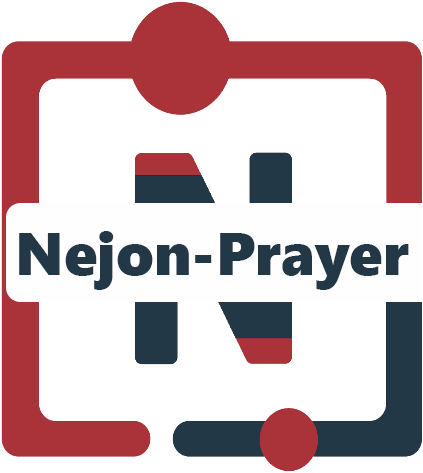
<style>
.page{position:relative;width:423px;height:473px;background:#ffffff}
.page>*{position:absolute;margin:0}
.t1{font:60px "SegoeUIBlack";color:#223847}
</style>
<div class="page">
<p class="t1" style="left:19px;top:231px;width:390px;height:59px">Nejon-Prayer</p>
</div>
